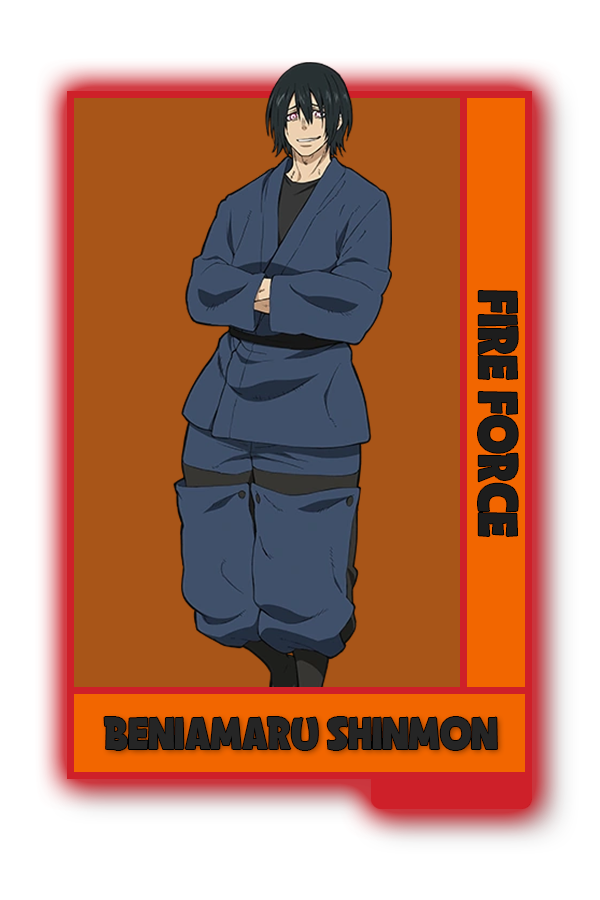
<style>
.page{position:relative;width:600px;height:900px;background:#a85518}
.page>*{position:absolute;margin:0}
.t1{font:69.6px "AristonComicDemo-Regular";color:#1d1d1d}
.t2{font:56.6px "AristonComicDemo-Regular";color:#252525}
</style>
<div class="page">
<p class="t1" style="left:478px;top:291px;width:40px;height:245px;rotate:90deg">FIRE FORCE</p>
<p class="t2" style="left:104px;top:717px;width:393px;height:33px">BENIAMARU SHINMON</p>
</div>
